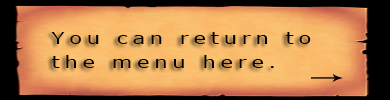
<style>
.page{position:relative;width:390px;height:100px}
.page>*{position:absolute;margin:0}
.t1{font:16.4px "Verdana";letter-spacing:0.22em;color:#000000;scale:1.29 1}
</style>
<div class="page">
<p class="t1" style="left:51px;top:32px;width:260px;height:36px">You can return to <br>the menu here.</p>
</div>
